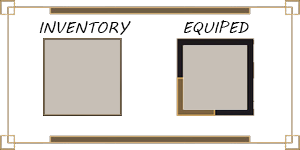
<style>
.page{position:relative;width:300px;height:150px;background:#ffffff}
.page>*{position:absolute;margin:0}
.t1{font:15.9px "MVBoli";color:#000000}
</style>
<div class="page">
<p class="t1" style="left:39px;top:21px;width:92px;height:14px">INVENTORY</p>
<p class="t1" style="left:184px;top:20px;width:65px;height:15px">EQUIPED</p>
</div>
